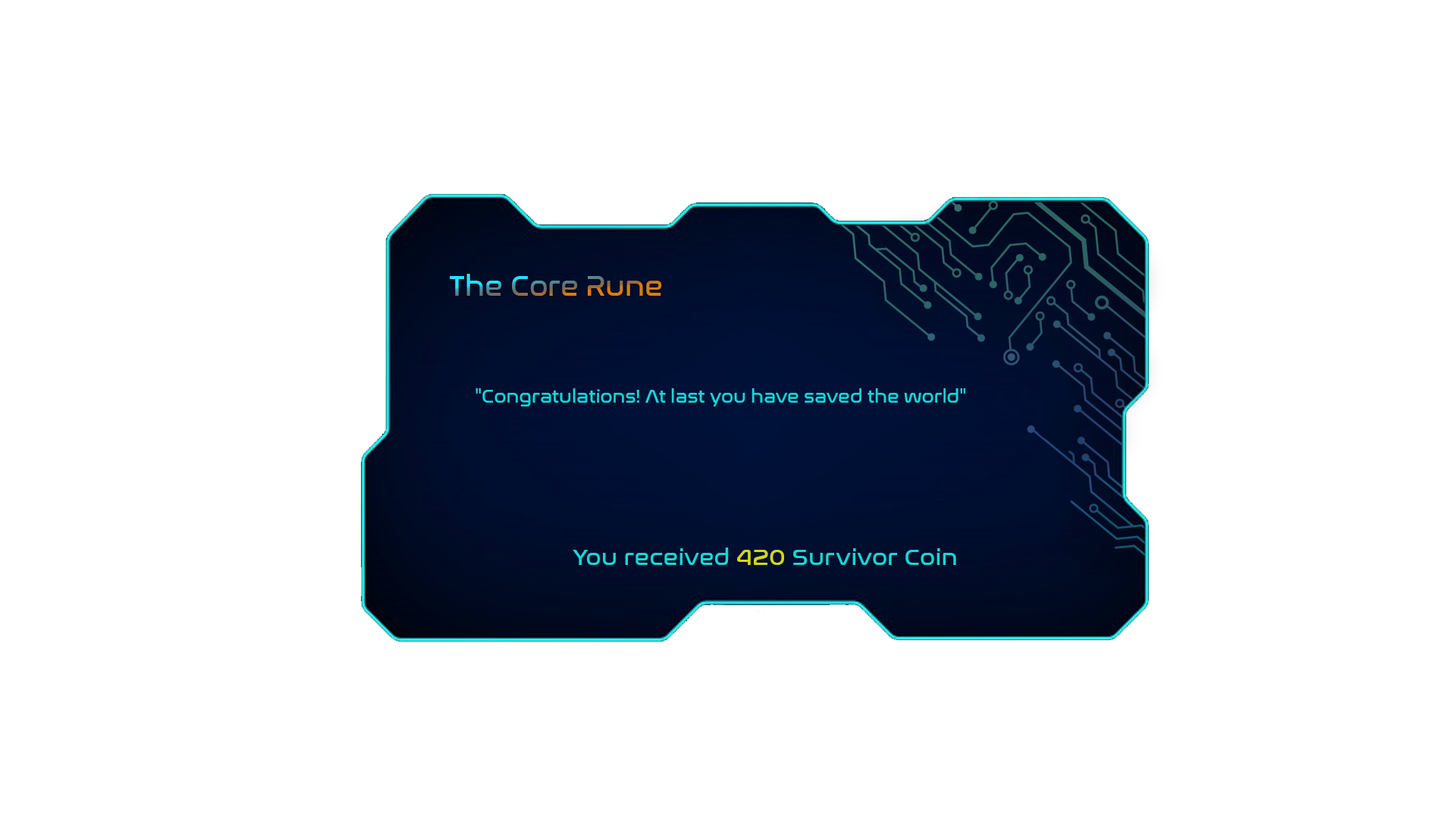
<style>
.page{position:relative;width:1456px;height:819px;background:#ffffff}
.page>*{position:absolute;margin:0}
.t1{font:27.7px "NasalizationRg-Regular"}
.t2{font:18.2px "NasalizationRg-Regular";color:#18d7d6}
.t3{font:23px "NasalizationRg-Regular";color:#18d7d6}
.t4{font:23px "NasalizationRg-Regular";color:#d3d718}
</style>
<div class="page">
<p class="t1" style="left:450px;top:274px;width:212px;height:22px">The Core Rune</p>
<p class="t2" style="left:475px;top:388px;width:490px;height:18px">"Congratulations! At last you have saved the world"</p>
<p class="t3" style="left:573px;top:548px;width:383px;height:17px">You received <span class="t4">420</span> Survivor Coin</p>
</div>
